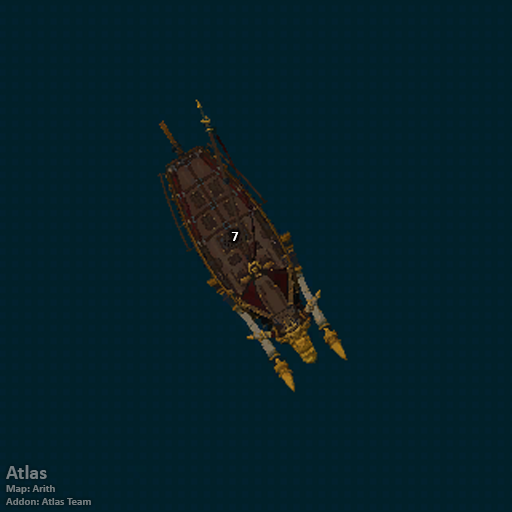
<style>
.page{position:relative;width:512px;height:512px;background:#012029}
.page>*{position:absolute;margin:0}
.t1{font:14px "Calibri-Bold";color:#ffffff}
.t2{font:11px "Calibri-Bold";color:#757e81}
.t3{font:20px "Calibri-Bold";color:#757e81}
</style>
<div class="page">
<p class="t1" style="left:231px;top:232px;width:8px;height:9px">7</p>
<p class="t2" style="left:6px;top:465px;width:85px;height:40px"><span class="t3">Atlas<br></span>Map: Arith<br>Addon: Atlas Team</p>
</div>
